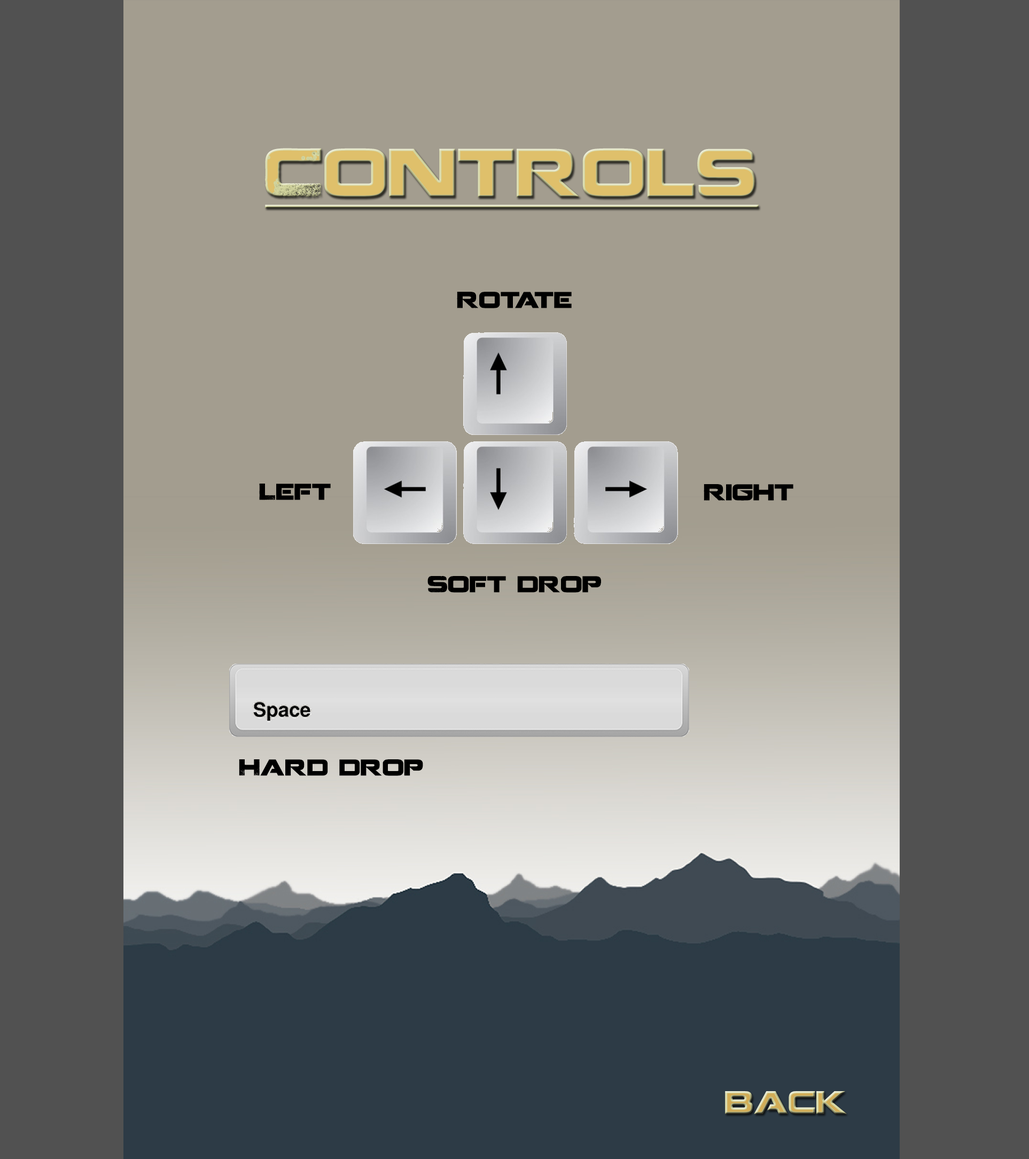
<style>
.page{position:relative;width:1029px;height:1159px;background:#a39d8f}
.page>*{position:absolute;margin:0}
.t1{font:68.1px "Coalition";letter-spacing:0.01em;color:#d2ad57;text-decoration:underline}
.t2{font:22.7px "Coalition";letter-spacing:0.01em;color:#000000}
.t3{font:31.8px "Coalition";letter-spacing:0.01em}
</style>
<div class="page">
<p class="t1" style="left:265px;top:148px;width:494px;height:60px">Controls</p>
<p class="t2" style="left:457px;top:292px;width:115px;height:16px">Rotate</p>
<p class="t2" style="left:259px;top:484px;width:72px;height:16px">Left</p>
<p class="t2" style="left:704px;top:484px;width:89px;height:17px">Right</p>
<p class="t2" style="left:427px;top:576px;width:174px;height:17px">Soft drop</p>
<p class="t2" style="left:239px;top:759px;width:184px;height:17px">Hard drop</p>
<p class="t3" style="left:725px;top:1091px;width:122px;height:23px">back</p>
</div>
